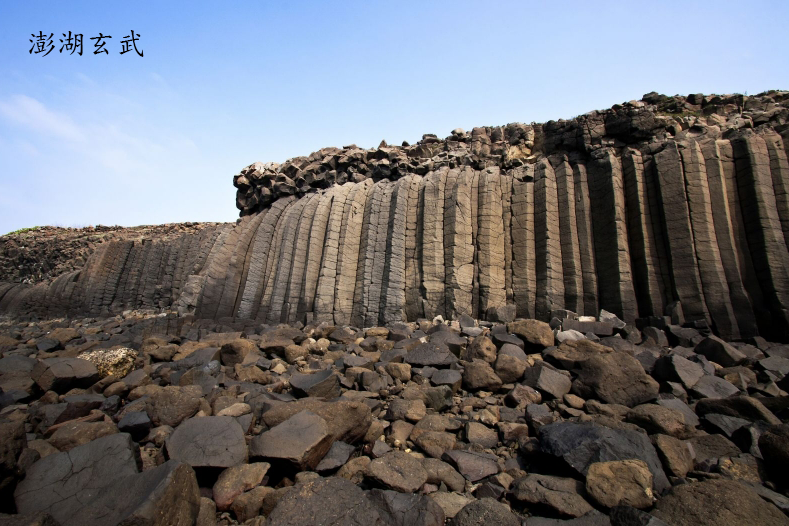
<style>
.page{position:relative;width:789px;height:526px}
.page>*{position:absolute;margin:0}
.t1{font:30px "DFKaiShu-SB-Estd-BF";color:#030000}
</style>
<div class="page">
<p class="t1" style="left:29px;top:30px;width:115px;height:27px">澎湖玄武</p>
</div>
